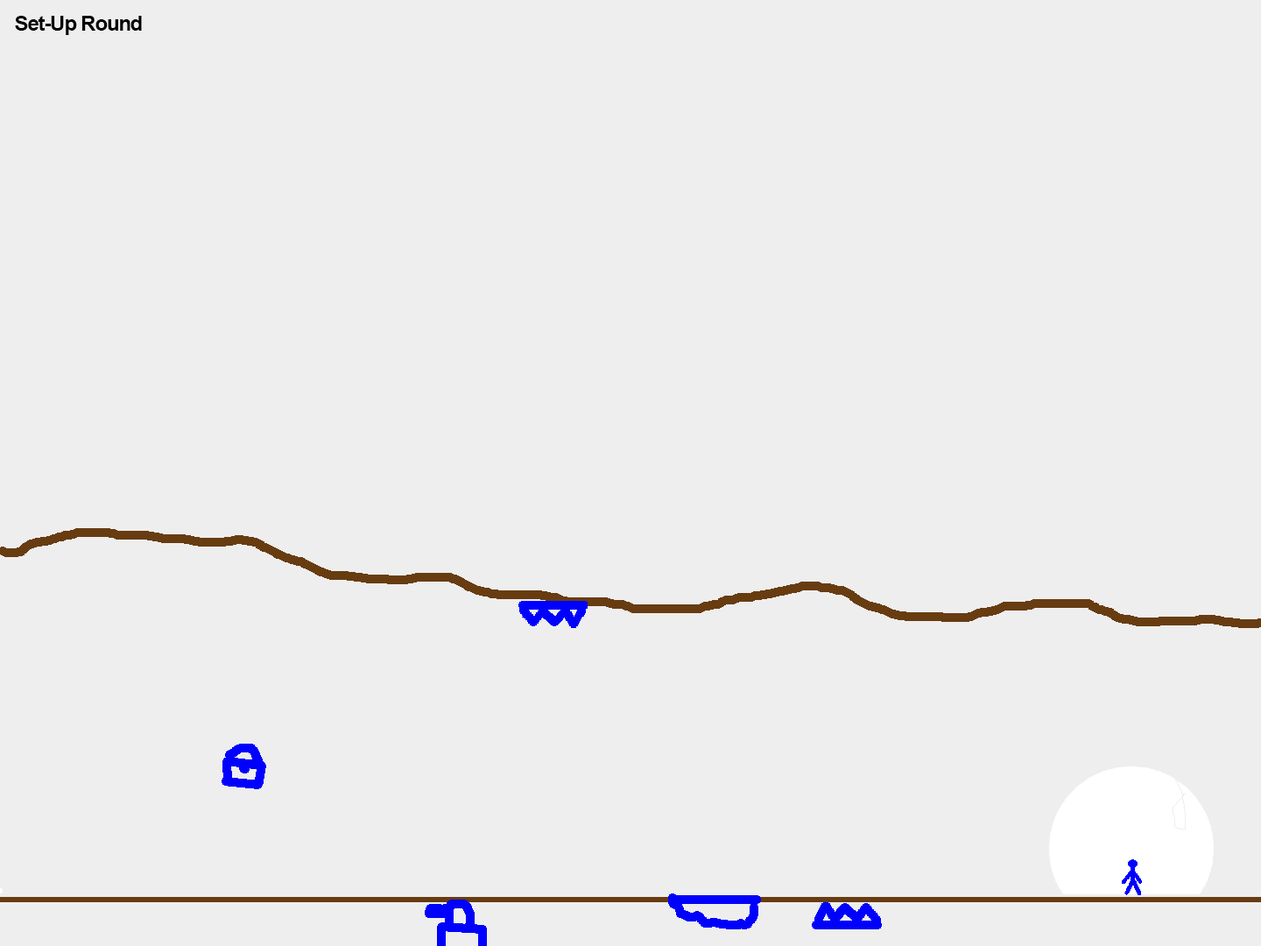
<style>
.page{position:relative;width:1261px;height:946px;background:#eeeeee}
.page>*{position:absolute;margin:0}
.t1{font:21px "Arial-BoldMT";letter-spacing:-0.05em;color:#000000}
</style>
<div class="page">
<p class="t1" style="left:15px;top:16px;width:127px;height:19px">Set-Up Round</p>
</div>
